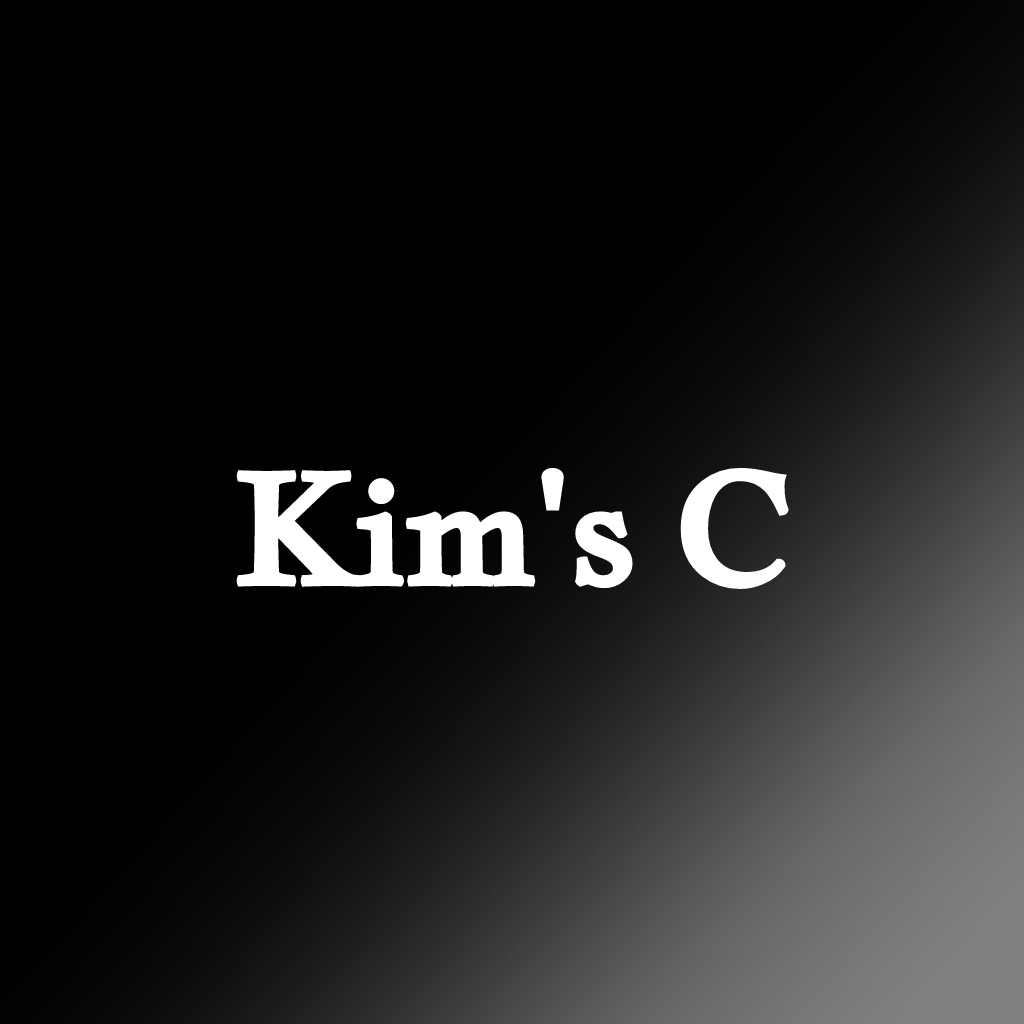
<style>
.page{position:relative;width:1024px;height:1024px;background:#000000}
.page>*{position:absolute;margin:0}
.t1{font:150px "JacquesFrancois-Regular";color:#ffffff}
</style>
<div class="page">
<p class="t1" style="left:236px;top:467px;width:553px;height:123px">Kim's C</p>
</div>
